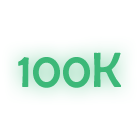
<style>
.page{position:relative;width:140px;height:140px;background:#ffffff}
.page>*{position:absolute;margin:0}
.t1{font:50px "BerlinSansFB-Reg";color:#3cb878}
</style>
<div class="page">
<p class="t1" style="left:18px;top:52px;width:103px;height:36px">100K</p>
</div>
